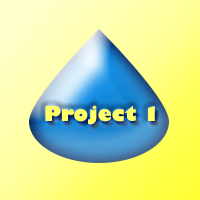
<style>
.page{position:relative;width:200px;height:200px}
.page>*{position:absolute;margin:0}
.t1{font:20px "GillSans-UltraBold";color:#ffff66}
</style>
<div class="page">
<p class="t1" style="left:45px;top:105px;width:110px;height:20px">Project 1</p>
</div>
